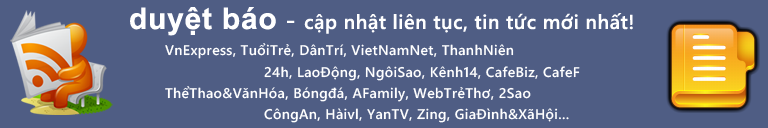
<style>
.page{position:relative;width:768px;height:128px;background:#4f5d84}
.page>*{position:absolute;margin:0}
.t1{font:20px "SegoeWP-Semibold";letter-spacing:0.025em;color:#ffffff}
.t2{font:30px "Arial-BoldMT";letter-spacing:0.025em;color:#ffffff}
.t3{font:26px "SegoeWP-Semibold";letter-spacing:0.025em;color:#ffffff}
.t4{font:14px "SegoeWP-Semibold";letter-spacing:0.025em;color:#ffffff}
</style>
<div class="page">
<p class="t1" style="left:130px;top:7px;width:503px;height:29px"><span class="t2">duyệt báo</span><span class="t3"> - </span>cập nhật liên tục, tin tức mới nhất!</p>
<p class="t4" style="left:165px;top:43px;width:349px;height:16px">VnExpress, TuổiTrẻ, DânTrí, VietNamNet, ThanhNiên</p>
<p class="t4" style="left:264px;top:66px;width:316px;height:15px">24h, LaoĐộng, NgôiSao, Kênh14, CafeBiz, CafeF</p>
<p class="t4" style="left:165px;top:86px;width:366px;height:16px">ThểThao&amp;VănHóa, Bóngđá, AFamily, WebTrẻThơ, 2Sao</p>
<p class="t4" style="left:264px;top:108px;width:305px;height:15px">CôngAn, Hàivl, YanTV, Zing, GiaĐình&amp;XãHội...</p>
</div>
